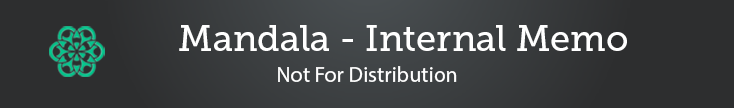
<style>
.page{position:relative;width:734px;height:108px;background:#2d2e2f}
.page>*{position:absolute;margin:0}
.t1{font:36px "MuseoSlab-500";color:#ffffff}
.t2{font:22px "MyriadPro-Regular";color:#ffffff}
</style>
<div class="page">
<p class="t1" style="left:179px;top:25px;width:448px;height:26px">Mandala - Internal Memo</p>
<p class="t2" style="left:278px;top:66px;width:179px;height:16px">Not For Distribution</p>
</div>
